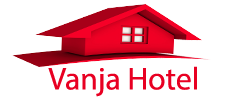
<style>
.page{position:relative;width:236px;height:110px;background:#ffffff}
.page>*{position:absolute;margin:0}
.t1{font:31.7px "MyriadHebrew-Regular";color:#e80022}
</style>
<div class="page">
<p class="t1" style="left:48px;top:66px;width:149px;height:31px">Vanja Hotel</p>
</div>
